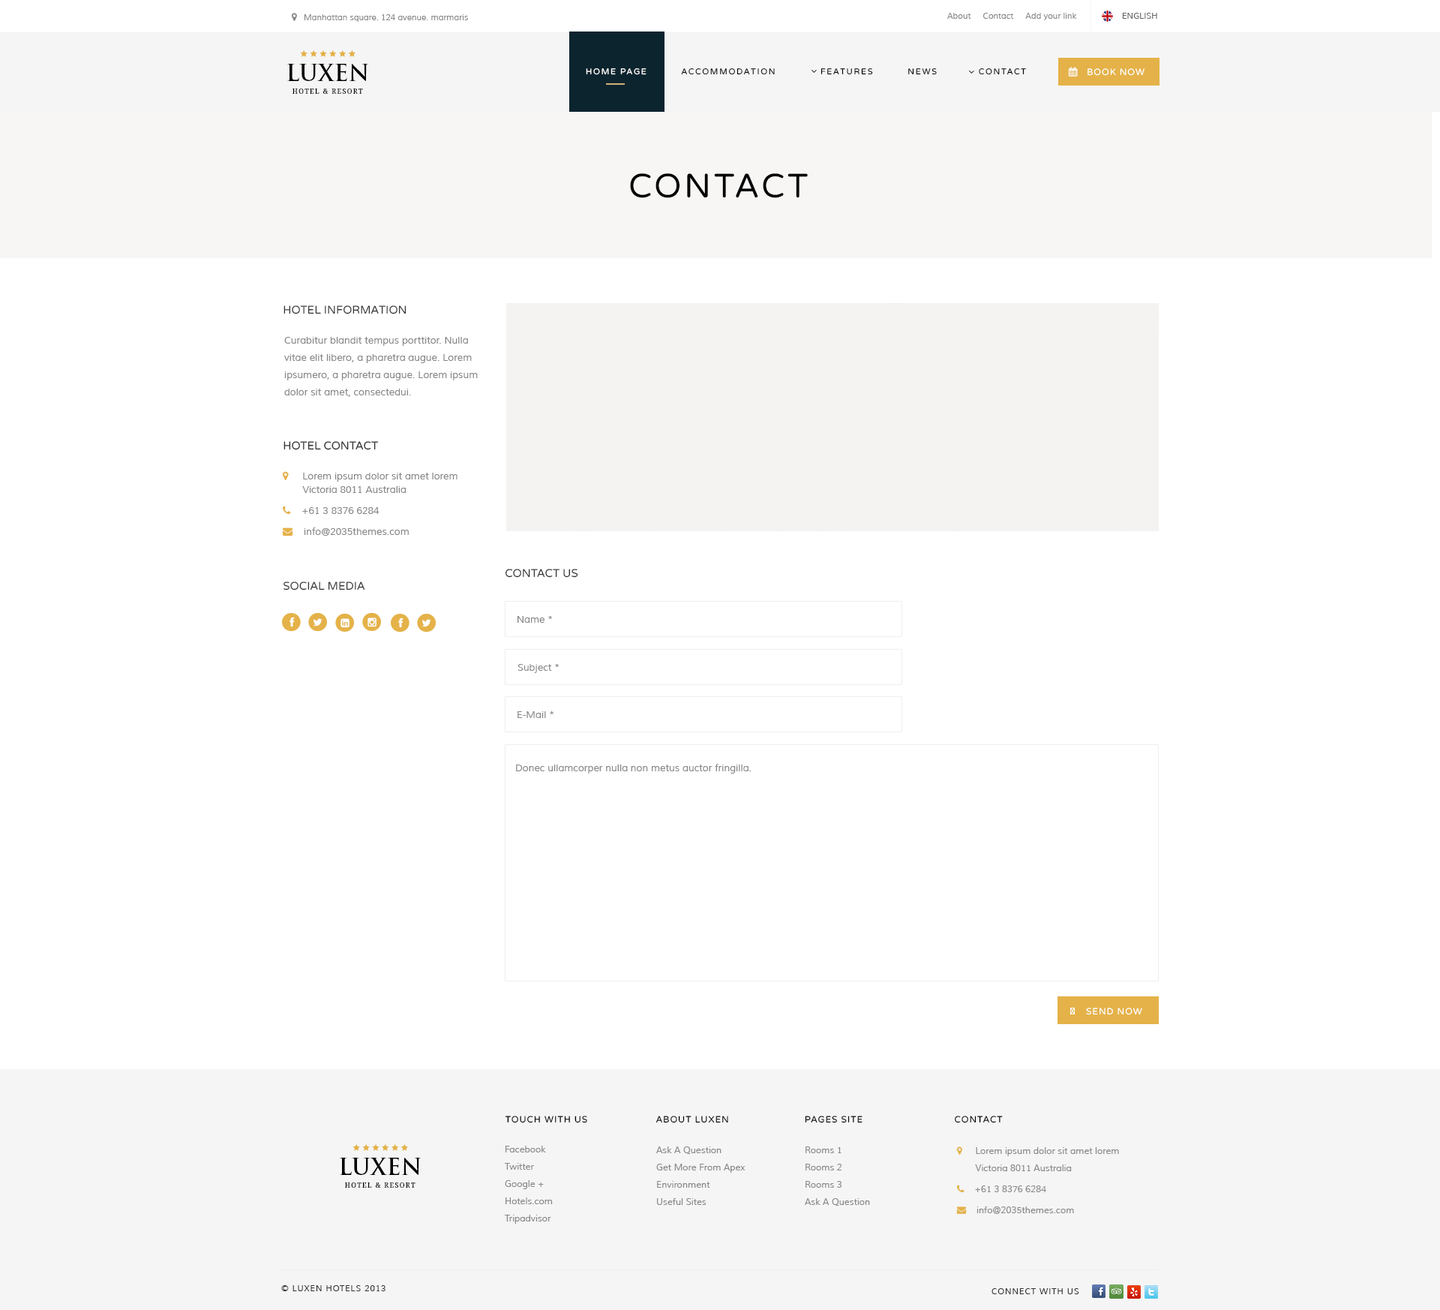
<style>
.page{position:relative;width:1440px;height:1310px;background:#ffffff}
.page>*{position:absolute;margin:0}
.t1{font:8.2px "Muli";color:#888888}
.t2{font:8.2px "Muli";color:#666666}
.t3{font:22.5px "TrajanPro-Bold";color:#000000;text-transform:uppercase}
.t4{font:8.2px "VarelaRound-Regular";letter-spacing:0.15em;color:#000000;text-transform:uppercase}
.t5{font:9px "VarelaRound-Regular";letter-spacing:0.08em;color:#ffffff;text-transform:uppercase}
.t6{font:6.8px "DroidSerif";letter-spacing:0.15em;color:#000000;text-transform:uppercase}
.t7{font:33.8px "VarelaRound-Regular";letter-spacing:0.08em;color:#000000;text-transform:uppercase}
.t8{font:11.2px "VarelaRound-Regular";color:#333333;text-transform:uppercase}
.t9{font:9.8px/17.2px "Muli";color:#888888}
.t10{font:9.8px "Muli";color:#888888}
.t11{font:9px "VarelaRound-Regular";letter-spacing:0.08em;color:#000000;text-transform:uppercase}
.t12{font:9px/17.2px "Muli";color:#888888}
.t13{font:8.2px "Muli";letter-spacing:0.08em;color:#333333;text-transform:uppercase}
</style>
<div class="page">
<p class="t1" style="left:304px;top:14px;width:164px;height:8px">Manhattan square. 124 avenue. marmaris</p>
<p class="t1" style="left:946px;top:13px;width:131px;height:7px">About     Contact     Add your link</p>
<p class="t2" style="left:1122px;top:13px;width:35px;height:6px">ENGLISH</p>
<p class="t3" style="left:287px;top:64px;width:81px;height:17px">Luxen</p>
<p class="t4" style="left:586px;top:68px;width:440px;height:7px">HOME PAGE          ACCOMMODATION             FEATUREs          NEWS            CONTACT</p>
<p class="t5" style="left:1088px;top:68px;width:56px;height:8px">book now</p>
<p class="t6" style="left:292px;top:88px;width:71px;height:6px">Hotel &amp; Resort</p>
<p class="t7" style="left:630px;top:173px;width:178px;height:25px">Contact</p>
<p class="t8" style="left:284px;top:305px;width:122px;height:9px">Hotel INFORMATION</p>
<p class="t9" style="left:284px;top:337px;width:194px;height:60px">Curabitur blandit tempus porttitor. Nulla vitae elit libero, a pharetra augue. Lorem ipsumero, a pharetra augue. Lorem ipsum dolor sit amet, consectedui.</p>
<p class="t8" style="left:284px;top:441px;width:95px;height:9px">Hotel contact</p>
<p class="t8" style="left:505px;top:568px;width:73px;height:10px">CONTACT US</p>
<p class="t8" style="left:284px;top:581px;width:81px;height:9px">social meDIA</p>
<p class="t10" style="left:518px;top:616px;width:34px;height:6px">Name *</p>
<p class="t10" style="left:518px;top:664px;width:41px;height:9px">Subject *</p>
<p class="t10" style="left:518px;top:711px;width:36px;height:7px">E-Mail *</p>
<p class="t10" style="left:516px;top:764px;width:235px;height:9px">Donec ullamcorper nulla non metus auctor fringilla.</p>
<p class="t5" style="left:1086px;top:1007px;width:56px;height:8px">send now</p>
<p class="t11" style="left:505px;top:1115px;width:82px;height:8px">touch with us</p>
<p class="t11" style="left:656px;top:1115px;width:72px;height:8px">About Luxen</p>
<p class="t11" style="left:805px;top:1115px;width:57px;height:8px">Pages site</p>
<p class="t11" style="left:955px;top:1115px;width:48px;height:8px">Contact</p>
<p class="t12" style="left:505px;top:1145px;width:48px;height:78px">Facebook<br>Twitter<br>Google +<br>Hotels.com<br>Tripadvisor</p>
<p class="t3" style="left:340px;top:1157px;width:81px;height:17px">Luxen</p>
<p class="t12" style="left:656px;top:1146px;width:90px;height:58px">Ask A Question<br>Get More From Apex<br>Environment<br>Useful Sites</p>
<p class="t12" style="left:805px;top:1146px;width:65px;height:59px">Rooms 1<br>Rooms 2<br>Rooms 3<br>Ask A Question<br>Get More From Apex<br>Environment<br>Useful Sites</p>
<p class="t6" style="left:345px;top:1182px;width:71px;height:5px">Hotel &amp; Resort</p>
<p class="t13" style="left:281px;top:1285px;width:105px;height:6px">© Luxen Hotels 2013</p>
<p class="t13" style="left:992px;top:1288px;width:87px;height:6px">Connect with us</p>
</div>
